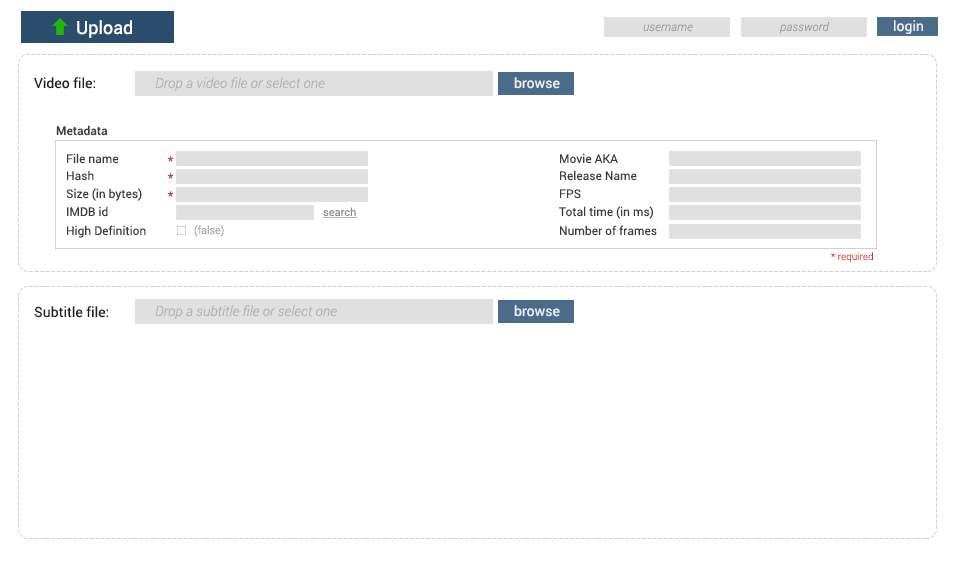
<style>
.page{position:relative;width:960px;height:580px;background:#ffffff}
.page>*{position:absolute;margin:0}
.t1{font:18px "Roboto-Regular";color:#ffffff}
.t2{font:12px "Roboto-LightItalic";color:#9d9d9d}
.t3{font:14px "Roboto-Regular";color:#ededed}
.t4{font:14px "Roboto-Regular";color:#222222}
.t5{font:14px "Roboto-LightItalic";color:#b0b0b0}
.t6{font:12px "Roboto-Medium";color:#3c3c3c}
.t7{font:12px "Roboto-Regular";color:#3c3c3c}
.t8{font:12px "Roboto-Regular";color:#cf3820}
.t9{font:11px "Roboto-Regular";color:#8b8b8b}
.t10{font:11px "Roboto-Light";color:#939393}
.t11{font:10px "Roboto-Light";color:#cf3820}
</style>
<div class="page">
<p class="t1" style="left:77px;top:20px;width:55px;height:18px">Upload</p>
<p class="t2" style="left:643px;top:24px;width:50px;height:8px">username</p>
<p class="t2" style="left:779px;top:21px;width:51px;height:13px">password</p>
<p class="t3" style="left:894px;top:20px;width:29px;height:14px">login</p>
<p class="t4" style="left:34px;top:77px;width:61px;height:12px">Video file:</p>
<p class="t5" style="left:155px;top:77px;width:170px;height:14px">Drop a video file or select one</p>
<p class="t3" style="left:514px;top:77px;width:46px;height:12px">browse</p>
<p class="t6" style="left:56px;top:125px;width:52px;height:11px">Metadata</p>
<p class="t7" style="left:67px;top:153px;width:52px;height:11px">File name</p>
<p class="t8" style="left:168px;top:156px;width:6px;height:6px">*</p>
<p class="t7" style="left:560px;top:153px;width:58px;height:11px">Movie AKA</p>
<p class="t7" style="left:67px;top:170px;width:27px;height:11px">Hash</p>
<p class="t8" style="left:168px;top:173px;width:6px;height:6px">*</p>
<p class="t7" style="left:560px;top:170px;width:77px;height:11px">Release Name</p>
<p class="t7" style="left:66px;top:188px;width:76px;height:13px">Size (in bytes)</p>
<p class="t8" style="left:168px;top:191px;width:6px;height:6px">*</p>
<p class="t7" style="left:560px;top:189px;width:21px;height:10px">FPS</p>
<p class="t7" style="left:67px;top:206px;width:41px;height:11px">IMDB id</p>
<p class="t9" style="left:323px;top:207px;width:33px;height:10px">search</p>
<p class="t7" style="left:559px;top:206px;width:94px;height:13px">Total time (in ms)</p>
<p class="t7" style="left:67px;top:225px;width:79px;height:13px">High Definition</p>
<p class="t10" style="left:194px;top:225px;width:30px;height:12px">(false)</p>
<p class="t7" style="left:560px;top:225px;width:97px;height:11px">Number of frames</p>
<p class="t11" style="left:831px;top:252px;width:42px;height:11px">* required</p>
<p class="t5" style="left:155px;top:305px;width:182px;height:14px">Drop a subtitle file or select one</p>
<p class="t3" style="left:514px;top:305px;width:46px;height:12px">browse</p>
<p class="t4" style="left:34px;top:306px;width:74px;height:12px">Subtitle file:</p>
</div>
